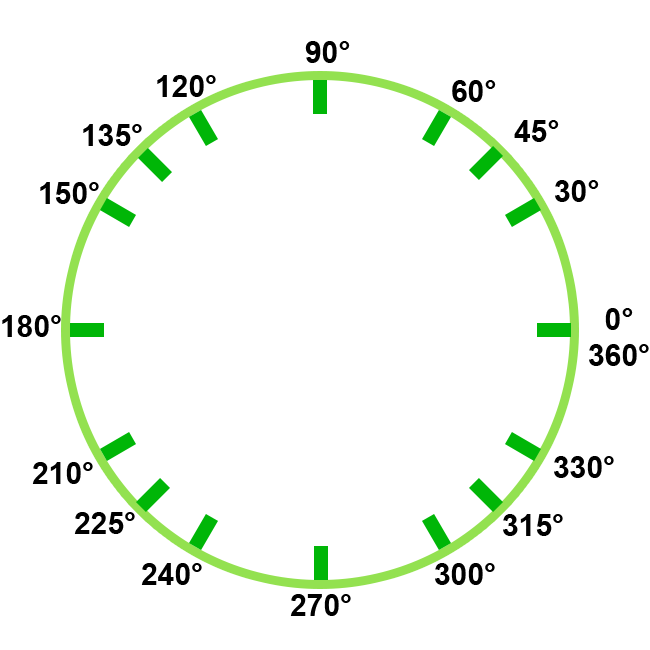
<style>
.page{position:relative;width:650px;height:650px;background:#ffffff}
.page>*{position:absolute;margin:0}
.t1{font:30px "Arial-BoldMT";color:#000000}
</style>
<div class="page">
<p class="t1" style="left:305px;top:41px;width:45px;height:22px">90°</p>
<p class="t1" style="left:157px;top:75px;width:59px;height:22px">120°</p>
<p class="t1" style="left:452px;top:80px;width:44px;height:22px">60°</p>
<p class="t1" style="left:83px;top:124px;width:59px;height:22px">135°</p>
<p class="t1" style="left:514px;top:120px;width:45px;height:22px">45°</p>
<p class="t1" style="left:40px;top:182px;width:59px;height:22px">150°</p>
<p class="t1" style="left:555px;top:180px;width:44px;height:22px">30°</p>
<p class="t1" style="left:2px;top:315px;width:59px;height:22px">180°</p>
<p class="t1" style="left:589px;top:308px;width:60px;height:58px">0°<br>360°</p>
<p class="t1" style="left:32px;top:462px;width:61px;height:22px">210°</p>
<p class="t1" style="left:554px;top:456px;width:60px;height:22px">330°</p>
<p class="t1" style="left:74px;top:512px;width:61px;height:22px">225°</p>
<p class="t1" style="left:503px;top:514px;width:60px;height:22px">315°</p>
<p class="t1" style="left:141px;top:563px;width:61px;height:22px">240°</p>
<p class="t1" style="left:435px;top:563px;width:60px;height:22px">300°</p>
<p class="t1" style="left:290px;top:594px;width:61px;height:22px">270°</p>
</div>
